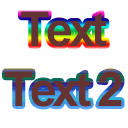
<style>
.page{position:relative;width:128px;height:128px;background:#ffffff}
.page>*{position:absolute;margin:0}
.t1{font:48px "Arial-BoldMT";letter-spacing:-0.08em;color:#663333}
</style>
<div class="page">
<p class="t1" style="left:21px;top:11px;width:86px;height:36px">Text</p>
<p class="t1" style="left:5px;top:71px;width:117px;height:36px">Text 2</p>
</div>
